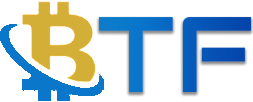
<style>
.page{position:relative;width:253px;height:102px;background:#ffffff}
.page>*{position:absolute;margin:0}
.t1{font:107.3px "Audiowide-Regular"}
</style>
<div class="page">
<p class="t1" style="left:99px;top:17px;width:152px;height:75px">TF</p>
</div>
